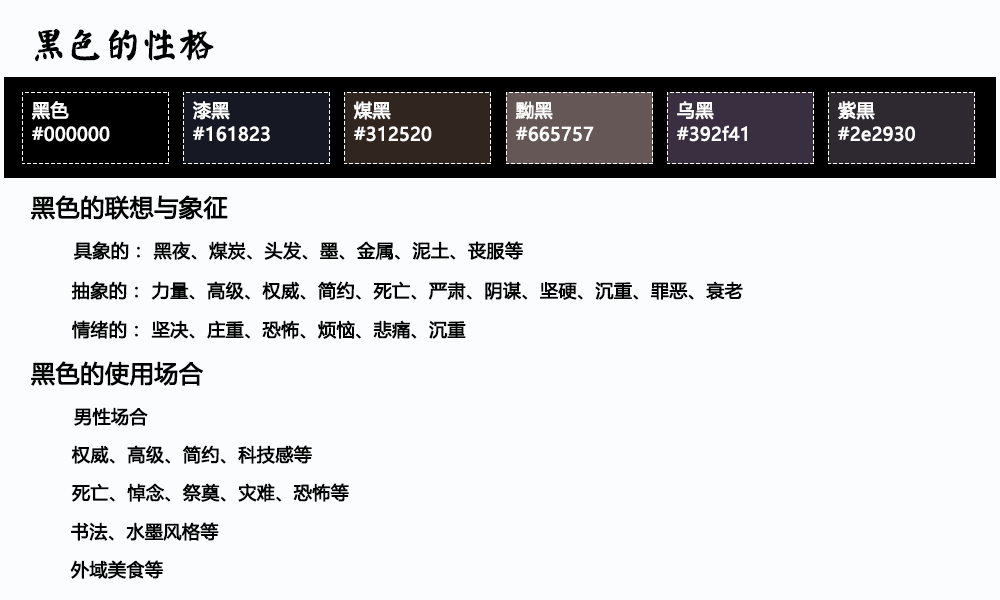
<style>
.page{position:relative;width:1000px;height:600px;background:#fbfcfd}
.page>*{position:absolute;margin:0}
.t1{font:36px "øów·»îów©I";color:#000000;font-weight:bold}
.t2{font:18px/24px "MicrosoftYaHei";color:#fffefe;font-weight:bold}
.t3{font:18px/24px "MicrosoftYaHei";color:#fdfcfc;font-weight:bold}
.t4{font:18px/24px "MicrosoftYaHei";color:#fbfafa;font-weight:bold}
.t5{font:18px/24px "MicrosoftYaHei";color:#fefdfd;font-weight:bold}
.t6{font:24px "MicrosoftYaHei";color:#010101;font-weight:bold}
.t7{font:18px "MicrosoftYaHei";color:#010101;font-weight:bold}
.t8{font:24px "MicrosoftYaHei";color:#020202;font-weight:bold}
.t9{font:18px "MicrosoftYaHei";color:#020202;font-weight:bold}
</style>
<div class="page">
<p class="t1" style="left:35px;top:29px;width:179px;height:33px">黑色的性格</p>
<p class="t2" style="left:32px;top:101px;width:78px;height:41px">黑色<br>#000000</p>
<p class="t2" style="left:193px;top:101px;width:77px;height:41px">漆黑<br>#161823</p>
<p class="t3" style="left:353px;top:101px;width:79px;height:41px">煤黑<br>#312520</p>
<p class="t4" style="left:515px;top:101px;width:79px;height:41px">黝黑<br>#665757</p>
<p class="t3" style="left:677px;top:101px;width:70px;height:41px">乌黑<br>#392f41</p>
<p class="t5" style="left:838px;top:101px;width:77px;height:41px">紫黒<br>#2e2930</p>
<p class="t6" style="left:31px;top:195px;width:197px;height:25px">黑色的联想与象征</p>
<p class="t7" style="left:74px;top:241px;width:449px;height:19px">具象的： 黑夜、煤炭、头发、墨、金属、泥土、丧服等</p>
<p class="t7" style="left:71px;top:281px;width:672px;height:19px">抽象的： 力量、高级、权威、简约、死亡、严肃、阴谋、坚硬、沉重、罪恶、衰老</p>
<p class="t7" style="left:72px;top:320px;width:394px;height:19px">情绪的： 坚决、庄重、恐怖、烦恼、悲痛、沉重</p>
<p class="t8" style="left:31px;top:361px;width:172px;height:25px">黑色的使用场合</p>
<p class="t9" style="left:74px;top:407px;width:74px;height:19px">男性场合</p>
<p class="t9" style="left:71px;top:445px;width:241px;height:19px">权威、高级、简约、科技感等</p>
<p class="t9" style="left:71px;top:483px;width:278px;height:19px">死亡、悼念、祭奠、灾难、恐怖等</p>
<p class="t9" style="left:71px;top:522px;width:148px;height:19px">书法、水墨风格等</p>
<p class="t9" style="left:70px;top:560px;width:93px;height:19px">外域美食等</p>
</div>
